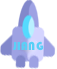
<style>
.page{position:relative;width:57px;height:69px;background:#ffffff}
.page>*{position:absolute;margin:0}
.t1{font:12px "STHupo";color:#5acff7}
</style>
<div class="page">
<p class="t1" style="left:13px;top:41px;width:31px;height:10px">JIANG</p>
</div>
